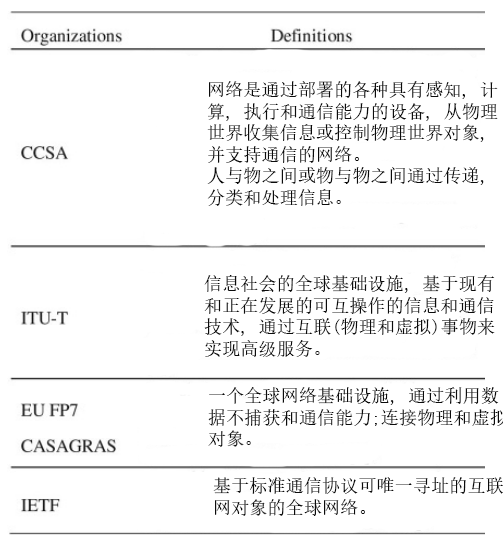
<style>
.page{position:relative;width:503px;height:544px;background:#ffffff}
.page>*{position:absolute;margin:0}
.t1{font:18px "SimSun";letter-spacing:0.01em;color:#0b0b0b}
</style>
<div class="page">
<p class="t1" style="left:207px;top:81px;width:291px;height:125px">网络是通过部署的各种具有感知, 计<br>算, 执行和通信能力的设备, 从物理<br>世界收集信息或控制物理世界对象, <br>并支持通信的网络。<br>人与物之间或物与物之间通过传递, <br>分类和处理信息。</p>
<p class="t1" style="left:204px;top:275px;width:291px;height:82px">信息社会的全球基础设施, 基于现有<br>和正在发展的可互操作的信息和通信<br>技术, 通过互联(物理和虚拟)事物来<br>实现高级服务。</p>
<p class="t1" style="left:213px;top:477px;width:291px;height:39px">基于标准通信协议可唯一寻址的互联<br>网对象的全球网络。</p>
</div>
